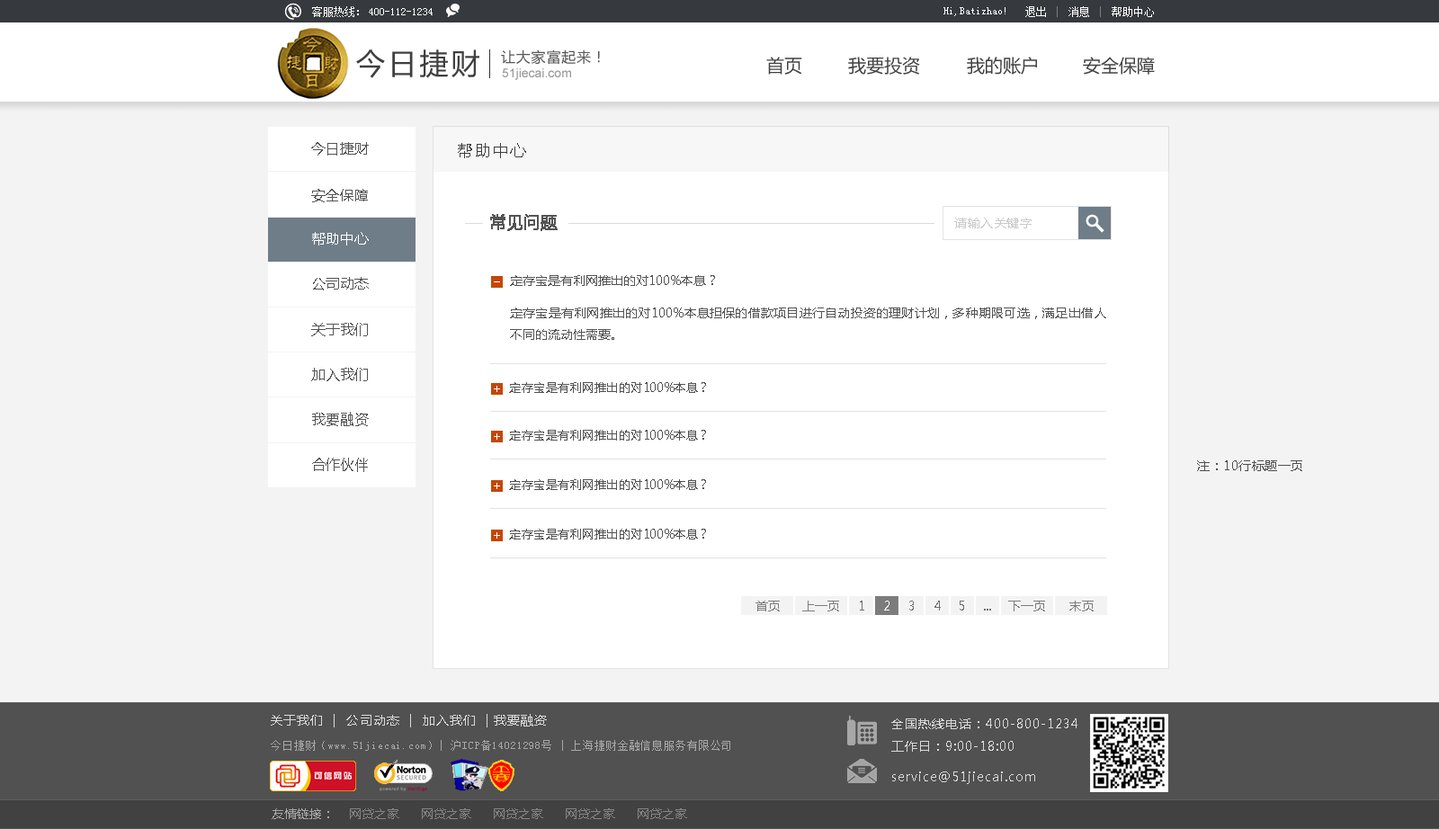
<style>
.page{position:relative;width:1439px;height:829px;background:#ffffff}
.page>*{position:absolute;margin:0}
.t1{font:10.8px "SimSun";color:#ffffff}
.t2{font:28.8px "MicrosoftYaHei";letter-spacing:0.1em;color:#3f3f3f}
.t3{font:14.4px "MicrosoftYaHei";letter-spacing:0.05em;color:#575757}
.t4{font:18px "MicrosoftYaHei";color:#414141}
.t5{font:12.6px "ArialMT";color:#969697}
.t6{font:14.4px "MicrosoftYaHei";color:#535353}
.t7{font:16.2px "MicrosoftYaHei";letter-spacing:0.1em;color:#3f3f3f}
.t8{font:16.2px "MicrosoftYaHei";color:#545454;font-weight:bold}
.t9{font:12.6px "MicrosoftYaHei";letter-spacing:0.04em;color:#cacaca}
.t10{font:14.4px "MicrosoftYaHei";color:#ffffff}
.t11{font:12.6px "MicrosoftYaHei";color:#545454}
.t12{font:12.6px/21.6px "MicrosoftYaHei";color:#545454}
.t13{font:14.4px "MicrosoftYaHei";color:#545454}
.t14{font:12.6px "MicrosoftYaHei";color:#545454;scale:0.96 1}
.t15{font:12.6px "MicrosoftYaHei";letter-spacing:0.04em;color:#4f4f4f}
.t16{font:12.6px "MicrosoftYaHei";letter-spacing:0.07em;color:#dbdbdb}
.t17{font:12.6px "MicrosoftYaHei";letter-spacing:0.07em;color:#dadada}
.t18{font:10.8px "SimSun";letter-spacing:0.07em;color:#a7a7a7}
.t19{font:12.6px "MicrosoftYaHei";color:#858484}
.t20{font:12.6px "MicrosoftYaHei";color:#a7a7a7}
</style>
<div class="page">
<p class="t1" style="left:312px;top:6px;width:47px;height:11px">客服热线：</p>
<p class="t1" style="left:369px;top:8px;width:63px;height:7px">400-112-1234</p>
<p class="t1" style="left:943px;top:7px;width:62px;height:9px">Hi,Batizhao!</p>
<p class="t1" style="left:1025px;top:6px;width:129px;height:11px">退出    消息    帮助中心</p>
<p class="t2" style="left:356px;top:49px;width:123px;height:29px">今日捷财</p>
<p class="t3" style="left:501px;top:49px;width:99px;height:15px">让大家富起来！</p>
<p class="t4" style="left:766px;top:57px;width:36px;height:18px">首页</p>
<p class="t4" style="left:848px;top:57px;width:72px;height:18px">我要投资</p>
<p class="t4" style="left:966px;top:57px;width:71px;height:18px">我的账户</p>
<p class="t4" style="left:1082px;top:57px;width:72px;height:18px">安全保障</p>
<p class="t5" style="left:502px;top:68px;width:69px;height:12px">51jiecai.com</p>
<p class="t6" style="left:311px;top:142px;width:58px;height:14px">今日捷财</p>
<p class="t7" style="left:458px;top:143px;width:68px;height:15px">帮助中心</p>
<p class="t6" style="left:311px;top:189px;width:57px;height:13px">安全保障</p>
<p class="t8" style="left:490px;top:214px;width:67px;height:17px">常见问题</p>
<p class="t9" style="left:954px;top:218px;width:77px;height:10px">请输入关键字</p>
<p class="t10" style="left:312px;top:232px;width:57px;height:13px">帮助中心</p>
<p class="t6" style="left:313px;top:277px;width:56px;height:13px">公司动态</p>
<p class="t11" style="left:510px;top:275px;width:205px;height:11px">定存宝是有利网推出的对100%本息？</p>
<p class="t12" style="left:510px;top:307px;width:596px;height:33px;text-align:justify">定存宝是有利网推出的对100%本息担保的借款项目进行自动投资的理财计划，多种期限可选，满足出借人不同的流动性需要。</p>
<p class="t13" style="left:311px;top:323px;width:57px;height:13px">关于我们</p>
<p class="t6" style="left:311px;top:368px;width:57px;height:13px">加入我们</p>
<p class="t14" style="left:509px;top:382px;width:197px;height:11px">定存宝是有利网推出的对100%本息？</p>
<p class="t6" style="left:312px;top:412px;width:57px;height:14px">我要融资</p>
<p class="t14" style="left:509px;top:430px;width:197px;height:11px">定存宝是有利网推出的对100%本息？</p>
<p class="t6" style="left:312px;top:458px;width:56px;height:14px">合作伙伴</p>
<p class="t15" style="left:1197px;top:460px;width:105px;height:11px">注：10行标题一页</p>
<p class="t14" style="left:509px;top:479px;width:197px;height:11px">定存宝是有利网推出的对100%本息？</p>
<p class="t14" style="left:509px;top:529px;width:197px;height:10px">定存宝是有利网推出的对100%本息？</p>
<p class="t16" style="left:271px;top:714px;width:276px;height:13px">关于我们  |  公司动态  |  加入我们  | 我要融资</p>
<p class="t17" style="left:891px;top:718px;width:186px;height:34px">全国热线电话：400-800-1234<br>工作日：9:00-18:00</p>
<p class="t18" style="left:271px;top:740px;width:459px;height:11px">今日捷财（www.51jiecai.com）| 沪ICP备14021298号 | 上海捷财金融信息服务有限公司</p>
<p class="t17" style="left:892px;top:771px;width:143px;height:13px">service@51jiecai.com</p>
<p class="t19" style="left:272px;top:808px;width:415px;height:11px"><span class="t20">友情链接：</span>    网贷之家      网贷之家      网贷之家      网贷之家      网贷之家</p>
</div>
